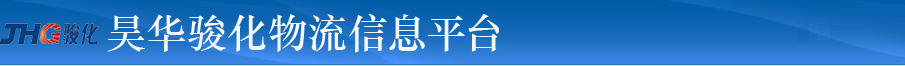
<style>
.page{position:relative;width:905px;height:66px}
.page>*{position:absolute;margin:0}
.t1{font:40px "STZhongsong";letter-spacing:0.05em;color:#f6f9f9}
</style>
<div class="page">
<p class="t1" style="left:107px;top:13px;width:392px;height:40px">昊华骏化物流信息平台</p>
</div>
